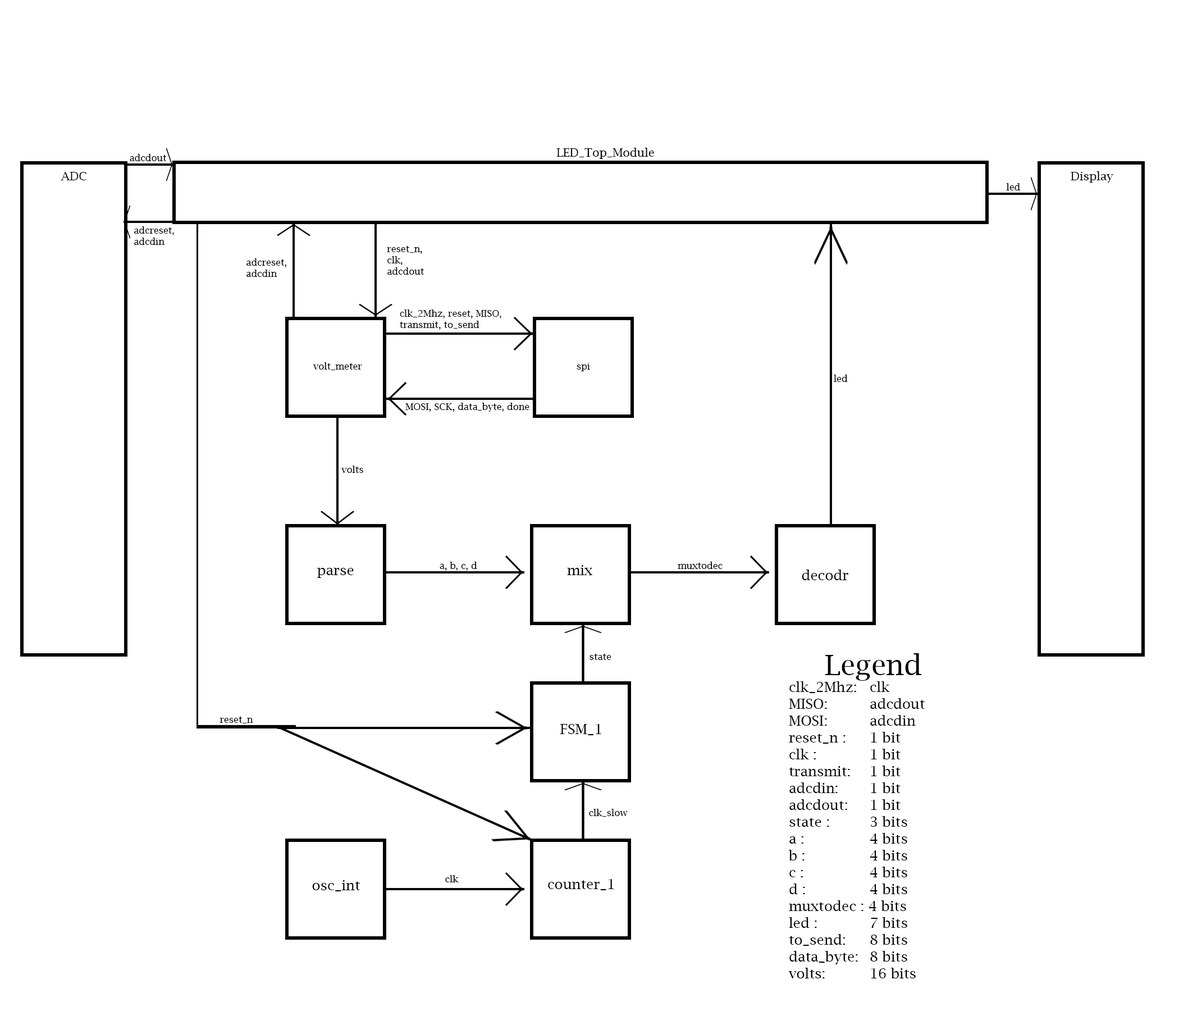
<style>
.page{position:relative;width:1179px;height:1011px;background:#ffffff}
.page>*{position:absolute;margin:0}
.t1{font:11.7px "LucidaBright";color:#000000}
.t2{font:9.4px "LucidaBright";color:#000000}
.t3{font:14px "LucidaBright";color:#000000}
.t4{font:28.1px "LucidaBright";color:#000000}
</style>
<div class="page">
<p class="t1" style="left:557px;top:148px;width:97px;height:11px">LED_Top_Module</p>
<p class="t2" style="left:130px;top:154px;width:37px;height:7px">adcdout</p>
<p class="t1" style="left:61px;top:172px;width:25px;height:8px">ADC</p>
<p class="t1" style="left:1071px;top:171px;width:43px;height:12px">Display</p>
<p class="t2" style="left:1006px;top:183px;width:15px;height:7px">led</p>
<p class="t2" style="left:134px;top:226px;width:40px;height:19px">adcreset, <br>adcdin</p>
<p class="t2" style="left:387px;top:245px;width:37px;height:30px">reset_n,<br>clk,<br>adcdout</p>
<p class="t2" style="left:247px;top:258px;width:39px;height:19px">adcreset,<br>adcdin</p>
<p class="t2" style="left:400px;top:309px;width:102px;height:21px">clk_2Mhz, reset, MISO, transmit, to_send</p>
<p class="t2" style="left:313px;top:362px;width:49px;height:8px">volt_meter</p>
<p class="t2" style="left:577px;top:363px;width:13px;height:8px">spi</p>
<p class="t2" style="left:834px;top:375px;width:14px;height:7px">led</p>
<p class="t2" style="left:406px;top:403px;width:124px;height:9px">MOSI, SCK, data_byte, done</p>
<p class="t2" style="left:341px;top:466px;width:22px;height:7px">volts</p>
<p class="t3" style="left:317px;top:568px;width:37px;height:10px">parse</p>
<p class="t2" style="left:440px;top:562px;width:37px;height:9px">a, b, c, d</p>
<p class="t3" style="left:567px;top:565px;width:26px;height:10px">mix</p>
<p class="t2" style="left:678px;top:562px;width:45px;height:7px">muxtodec</p>
<p class="t3" style="left:802px;top:570px;width:47px;height:10px">decodr</p>
<p class="t2" style="left:590px;top:653px;width:22px;height:7px">state</p>
<p class="t3" style="left:789px;top:653px;width:137px;height:325px;text-align:center"><span class="t4">Legend</span><br>clk_2Mhz:  clk<br>MISO:   adcdout<br>MOSI:   adcdin<br>reset_n :  1 bit<br>clk :    1 bit<br>transmit:  1 bit<br>adcdin:   1 bit<br>adcdout:  1 bit<br>state :   3 bits <br>a :    4 bits<br>b :    4 bits<br>c :     4 bits<br>d :    4 bits<br>muxtodec : 4 bits<br>led :    7 bits<br>to_send:  8 bits<br>data_byte:  8 bits<br>volts:   16 bits</p>
<p class="t2" style="left:220px;top:716px;width:33px;height:7px">reset_n</p>
<p class="t3" style="left:561px;top:724px;width:41px;height:11px">FSM_1</p>
<p class="t2" style="left:589px;top:809px;width:39px;height:8px">clk_slow</p>
<p class="t3" style="left:312px;top:880px;width:49px;height:11px">osc_int</p>
<p class="t2" style="left:445px;top:875px;width:14px;height:7px">clk</p>
<p class="t3" style="left:548px;top:879px;width:66px;height:11px">counter_1</p>
</div>
